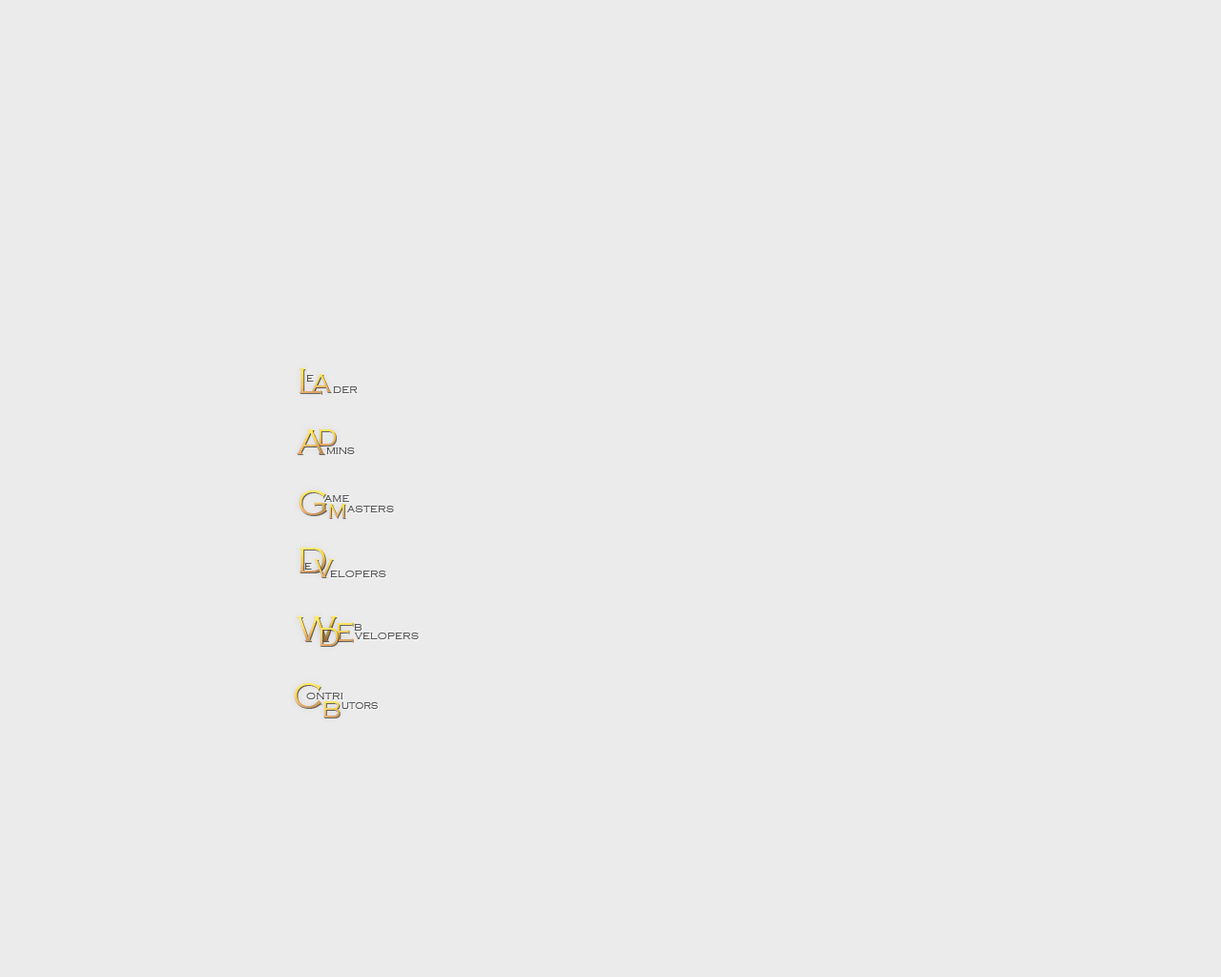
<style>
.page{position:relative;width:1221px;height:977px;background:#ebebeb}
.page>*{position:absolute;margin:0}
.t1{font:52.5px "CopperplateGothic-Light";font-variant:small-caps}
.t2{font:14.3px "CopperplateGothic-Light";color:#555555;font-variant:small-caps}
.t3{font:38.2px "CopperplateGothic-Light";font-variant:small-caps}
.t4{font:15.3px "CopperplateGothic-Light";color:#595959;font-variant:small-caps}
.t5{font:35.3px "CopperplateGothic-Light";font-variant:small-caps}
.t6{font:14.3px "CopperplateGothic-Light";color:#595959;font-variant:small-caps}
.t7{font:15.3px "CopperplateGothic-Light";color:#585858;font-variant:small-caps}
.t8{font:29.6px "CopperplateGothic-Light";color:#fad363;font-variant:small-caps}
.t9{font:15.3px "CopperplateGothic-Light";color:#4b4b4b;font-variant:small-caps}
.t10{font:13.4px "CopperplateGothic-Light";color:#595959;font-variant:small-caps}
</style>
<div class="page">
<p class="t1" style="left:299px;top:368px;width:22px;height:26px">l</p>
<p class="t2" style="left:306px;top:375px;width:8px;height:7px">e</p>
<p class="t3" style="left:311px;top:374px;width:20px;height:18px">a</p>
<p class="t4" style="left:333px;top:386px;width:25px;height:7px">der</p>
<p class="t1" style="left:297px;top:429px;width:27px;height:25px">a</p>
<p class="t5" style="left:318px;top:429px;width:19px;height:16px">d</p>
<p class="t6" style="left:326px;top:447px;width:29px;height:7px">mins</p>
<p class="t1" style="left:299px;top:490px;width:27px;height:25px">g</p>
<p class="t7" style="left:324px;top:495px;width:25px;height:7px">ame</p>
<p class="t8" style="left:328px;top:504px;width:17px;height:14px">m</p>
<p class="t4" style="left:347px;top:506px;width:47px;height:6px">asters</p>
<p class="t1" style="left:299px;top:547px;width:26px;height:25px">d</p>
<p class="t9" style="left:304px;top:563px;width:8px;height:6px">e</p>
<p class="t3" style="left:314px;top:559px;width:19px;height:18px">v</p>
<p class="t4" style="left:330px;top:570px;width:56px;height:7px">elopers</p>
<p class="t1" style="left:296px;top:616px;width:41px;height:25px">w</p>
<p class="t3" style="left:320px;top:628px;width:19px;height:18px">d</p>
<p class="t3" style="left:337px;top:622px;width:16px;height:20px">e</p>
<p class="t7" style="left:354px;top:624px;width:7px;height:6px">b</p>
<p class="t4" style="left:355px;top:632px;width:64px;height:7px">velopers</p>
<p class="t1" style="left:294px;top:683px;width:27px;height:25px">c</p>
<p class="t4" style="left:306px;top:692px;width:37px;height:7px">ontri</p>
<p class="t5" style="left:322px;top:701px;width:18px;height:16px">b</p>
<p class="t10" style="left:341px;top:702px;width:37px;height:7px">utors</p>
</div>
